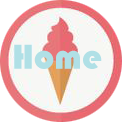
<style>
.page{position:relative;width:122px;height:122px;background:#ffffff}
.page>*{position:absolute;margin:0}
.t1{font:36px "Bauhaus93";color:#b0e0e6}
</style>
<div class="page">
<p class="t1" style="left:14px;top:44px;width:88px;height:25px">Home</p>
</div>
